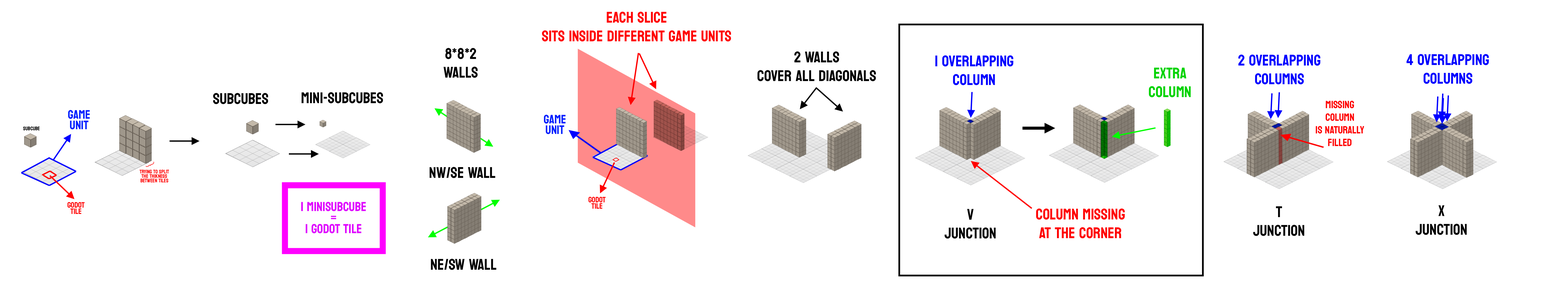
<style>
.page{position:relative;width:1568px;height:300px;background:#ffffff}
.page>*{position:absolute;margin:0}
.t1{font:15.5px "Bayon-Regular";color:#ff0000}
.t2{font:15.5px "Bayon-Regular";color:#000000}
.t3{font:15.5px "Bayon-Regular";color:#0000ff}
.t4{font:15.5px "Bayon-Regular";color:#01d300}
.t5{font:10.5px "Bayon-Regular";color:#ff0000}
.t6{font:12.2px/10.4px "Bayon-Regular";color:#001eff}
.t7{font:5.3px "Bayon-Regular";color:#000000}
.t8{font:5.3px/4.5px "Bayon-Regular";color:#ff0000}
.t9{font:7.9px/6.3px "Bayon-Regular";color:#ff0000}
.t10{font:13px/11px "Bayon-Regular";color:#df00ff}
</style>
<div class="page">
<p class="t1" style="left:542px;top:12px;width:189px;height:30px;text-align:center">EACH SLICE<br>SITS INSIDE DIFFERENT GAME UNITS</p>
<p class="t2" style="left:443px;top:48px;width:35px;height:30px;text-align:center">8*8*2<br>WALLS</p>
<p class="t2" style="left:757px;top:51px;width:119px;height:30px;text-align:center">2 WALLS<br>COVER ALL DIAGONALS</p>
<p class="t3" style="left:1406px;top:54px;width:83px;height:30px;text-align:center">4 OVERLAPPING<br>COLUMNS</p>
<p class="t3" style="left:935px;top:55px;width:78px;height:30px;text-align:center">1 OVERLAPPING<br>COLUMN</p>
<p class="t3" style="left:1238px;top:54px;width:82px;height:30px;text-align:center">2 OVERLAPPING<br>COLUMNS</p>
<p class="t4" style="left:1149px;top:67px;width:42px;height:30px;text-align:center">EXTRA<br>COLUMN</p>
<p class="t2" style="left:213px;top:93px;width:55px;height:11px">SUBCUBES</p>
<p class="t2" style="left:302px;top:92px;width:81px;height:11px">MINI-SUBCUBES</p>
<p class="t5" style="left:1316px;top:100px;width:48px;height:46px;text-align:center">MISSING<br>COLUMN<br>IS NATURALLY<br>FILLED</p>
<p class="t6" style="left:68px;top:110px;width:22px;height:19px;text-align:center">GAME<br>UNIT</p>
<p class="t6" style="left:544px;top:115px;width:22px;height:19px;text-align:center">GAME<br>UNIT</p>
<p class="t7" style="left:23px;top:126px;width:17px;height:4px">SUBCUBE</p>
<p class="t8" style="left:140px;top:169px;width:29px;height:13px;text-align:center">TRYING TO SPLIT<br>THE THIKNESS<br>BETWEEN TILES</p>
<p class="t2" style="left:430px;top:167px;width:65px;height:11px">NW/SE WALL</p>
<p class="t9" style="left:588px;top:196px;width:18px;height:12px;text-align:center">GODOT<br>TILE</p>
<p class="t9" style="left:67px;top:202px;width:18px;height:12px;text-align:center">GODOT<br>TILE</p>
<p class="t10" style="left:301px;top:202px;width:65px;height:31px;text-align:center">1 MINISUBCUBE<br>=<br>1 GODOT TILE</p>
<p class="t2" style="left:944px;top:208px;width:52px;height:30px;text-align:center">V<br>JUNCTION</p>
<p class="t1" style="left:1036px;top:208px;width:89px;height:30px;text-align:center">COLUMN MISSING<br>AT THE CORNER</p>
<p class="t2" style="left:1253px;top:206px;width:51px;height:30px;text-align:center">T<br>JUNCTION</p>
<p class="t2" style="left:1416px;top:205px;width:51px;height:30px;text-align:center">X<br>JUNCTION</p>
<p class="t2" style="left:431px;top:258px;width:65px;height:12px">NE/SW WALL</p>
</div>
